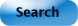
<style>
.page{position:relative;width:78px;height:26px}
.page>*{position:absolute;margin:0}
.t1{font:13px "LucidaGrande-Bold";color:#000000}
</style>
<div class="page">
<p class="t1" style="left:16px;top:6px;width:43px;height:11px">Search</p>
</div>
